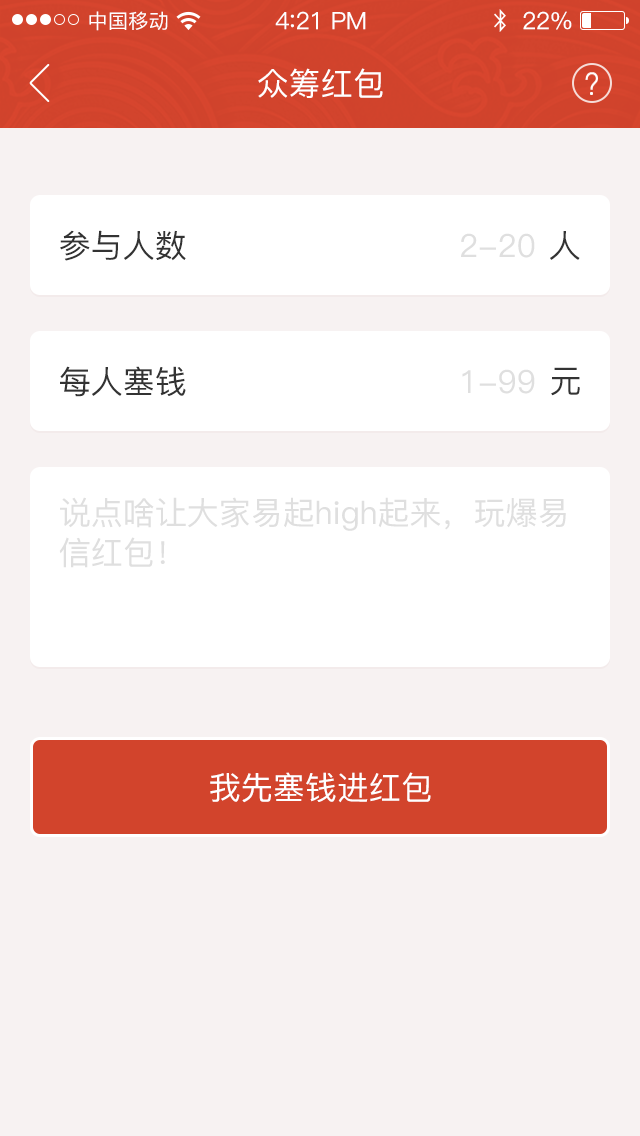
<style>
.page{position:relative;width:640px;height:1136px;background:#f7f2f2}
.page>*{position:absolute;margin:0}
.t1{font:20px "PingFang-SC-Medium";letter-spacing:0.02em;color:#ffffff}
.t2{font:24px "PingFang-SC-Medium";letter-spacing:-0.02em;color:#ffffff}
.t3{font:26px "PingFang-SC-Medium";letter-spacing:-0.02em;color:#ffffff}
.t4{font:32px "PingFang-SC-Medium";color:#ffffff}
.t5{font:32px "PingFang-SC-Medium";color:#333333}
.t6{font:32px "PingFang-SC-Medium";color:#dfdfdf}
.t7{font:32px/40px "PingFang-SC-Medium";color:#dfdfdf}
</style>
<div class="page">
<p class="t1" style="left:89px;top:11px;width:79px;height:20px">中国移动</p>
<p class="t2" style="left:275px;top:11px;width:91px;height:19px">4<span class="t3">:</span>21 PM</p>
<p class="t2" style="left:523px;top:11px;width:49px;height:19px">22%</p>
<p class="t4" style="left:258px;top:68px;width:125px;height:30px">众筹红包</p>
<p class="t5" style="left:60px;top:230px;width:126px;height:31px">参与人数</p>
<p class="t6" style="left:461px;top:233px;width:74px;height:25px">2-20</p>
<p class="t5" style="left:550px;top:231px;width:30px;height:29px">人</p>
<p class="t5" style="left:60px;top:366px;width:126px;height:31px">每人塞钱</p>
<p class="t6" style="left:462px;top:369px;width:73px;height:25px">1-99</p>
<p class="t5" style="left:551px;top:367px;width:29px;height:29px">元</p>
<p class="t7" style="left:59px;top:497px;width:507px;height:71px">说点啥让大家易起high起来，玩爆易<br>信红包！</p>
<p class="t4" style="left:210px;top:772px;width:221px;height:31px">我先塞钱进红包</p>
</div>
